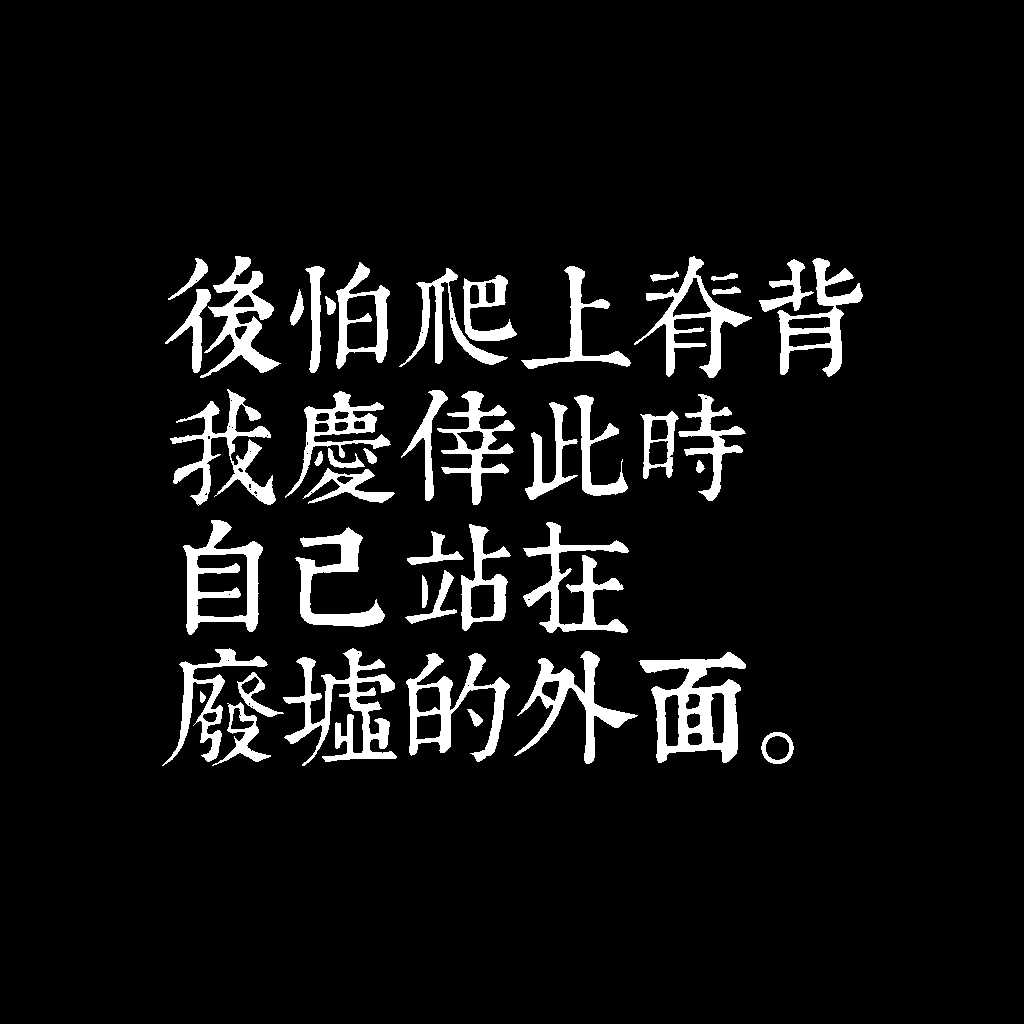
<style>
.page{position:relative;width:1024px;height:1024px;background:#000000}
.page>*{position:absolute;margin:0}
.t1{font:120px/130px "TpldKhangXiDictTrial";letter-spacing:-0.02em;color:#ffffff}
</style>
<div class="page">
<p class="t1" style="left:162px;top:256px;width:701px;height:510px">後怕爬上脊背<br>我慶倖此時<br>自己站在<br>廢墟的外面。</p>
</div>
